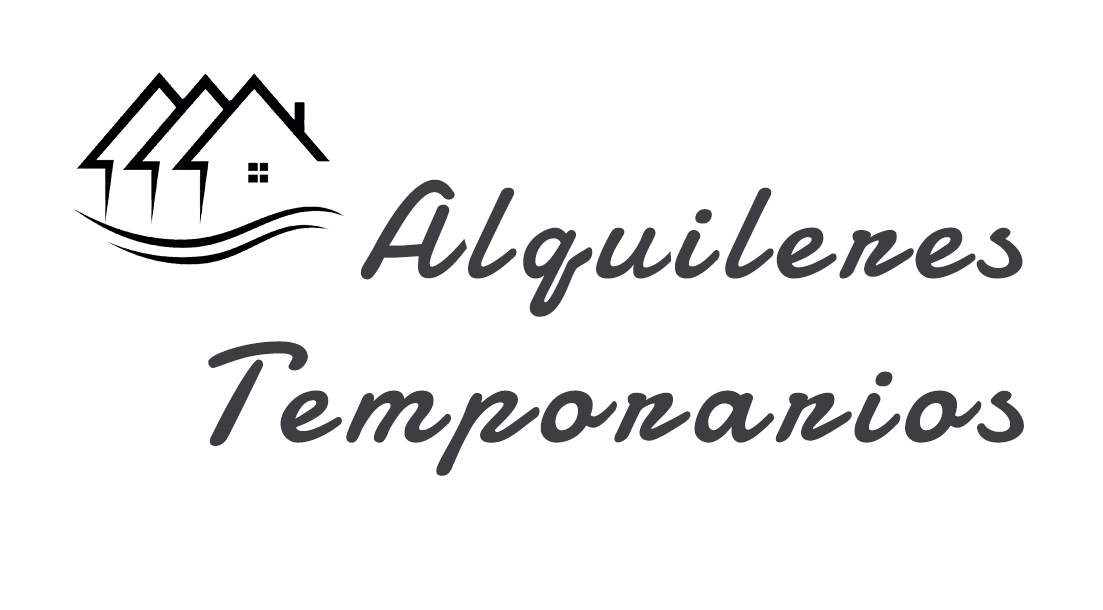
<style>
.page{position:relative;width:1103px;height:610px;background:#ffffff}
.page>*{position:absolute;margin:0}
.t1{font:137.4px "Damion";letter-spacing:0.1em;color:#3e3e42;font-weight:bold}
.t2{font:140.9px "Damion";letter-spacing:0.1em;color:#3e3e42;font-weight:bold}
</style>
<div class="page">
<p class="t1" style="left:360px;top:179px;width:663px;height:138px">Alquileres</p>
<p class="t2" style="left:208px;top:341px;width:816px;height:135px">Temporarios</p>
</div>
